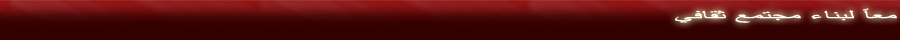
<style>
.page{position:relative;width:900px;height:40px;background:#330000}
.page>*{position:absolute;margin:0}
.t1{font:12.2px "ArabicTransparent";color:#ffffff;scale:2.64 1}
</style>
<div class="page">
<p class="t1" style="left:674px;top:8px;width:223px;height:15px">معاً لبناء مجتمع ثقافي</p>
</div>
